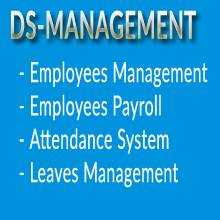
<style>
.page{position:relative;width:220px;height:220px;background:#0093dd}
.page>*{position:absolute;margin:0}
.t1{font:38.3px "Lato-Bold";letter-spacing:0.025em;scale:0.53 1}
.t2{font:27.8px "Lato-Regular";letter-spacing:0.025em;color:#f8f5f2;scale:0.57 1}
</style>
<div class="page">
<p class="t1" style="left:11px;top:10px;width:185px;height:29px">DS-MANAGEMENT</p>
<p class="t2" style="left:19px;top:61px;width:189px;height:127px">- Employees Management<br>- Employees Payroll<br>- Attendance System<br>- Leaves Management</p>
</div>
